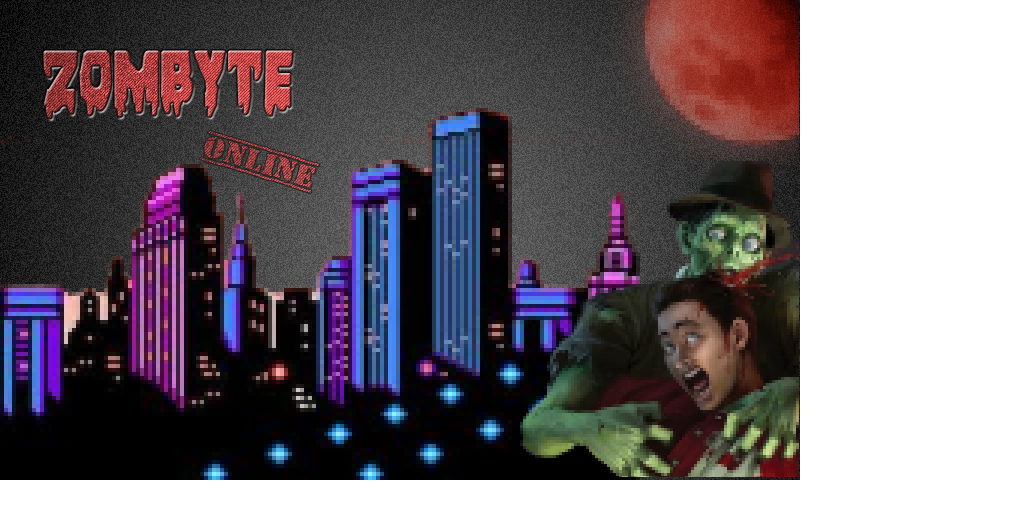
<style>
.page{position:relative;width:1024px;height:512px;background:#ffffff}
.page>*{position:absolute;margin:0}
.t1{font:100px "Bloodlust";font-weight:bold}
.t2{font:30px "OldStamper";font-weight:bold}
</style>
<div class="page">
<p class="t1" style="left:43px;top:50px;width:251px;height:70px">Zombyte</p>
<p class="t2" style="left:200px;top:131px;width:120px;height:62px;rotate:17deg">online</p>
</div>
